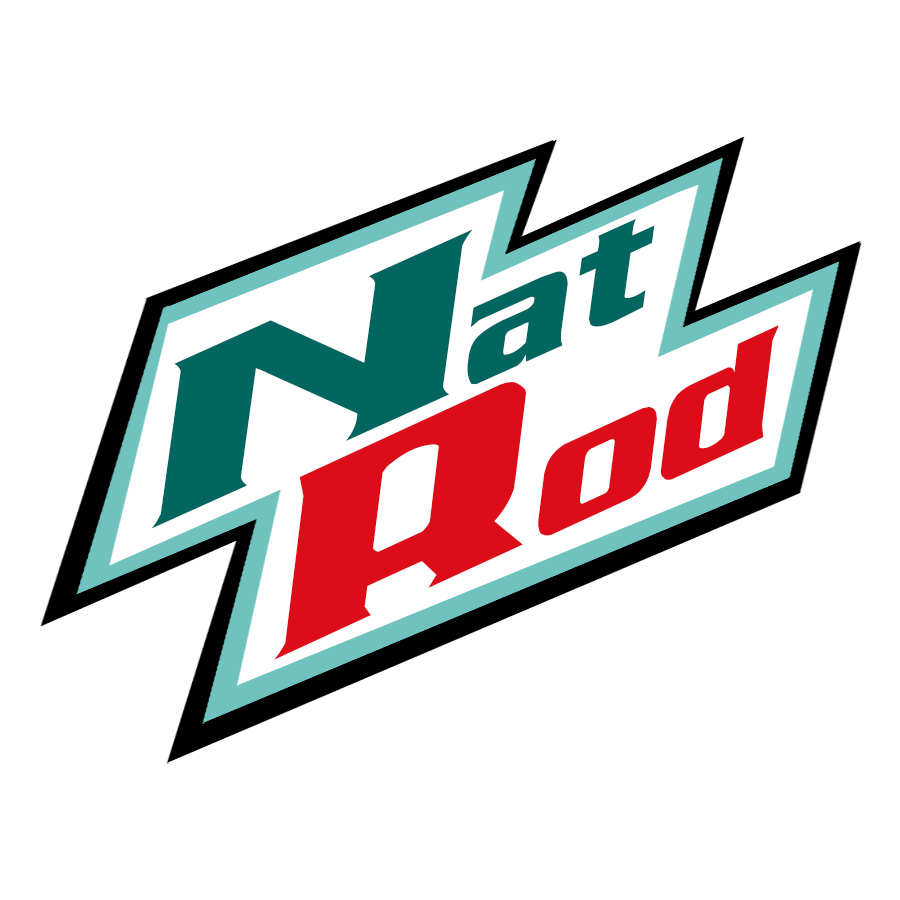
<style>
.page{position:relative;width:900px;height:900px;background:#ffffff}
.page>*{position:absolute;margin:0}
.t1{font:218.9px "AirMillhouseItalic";color:#01665f;scale:1.37 1}
.t2{font:238.8px "AirMillhouseItalic";color:#dc0d19;scale:1.38 1}
</style>
<div class="page">
<p class="t1" style="left:151px;top:218px;width:504px;height:311px;rotate:-24deg">Nat</p>
<p class="t2" style="left:274px;top:325px;width:505px;height:335px;rotate:-25deg">Rod</p>
</div>
